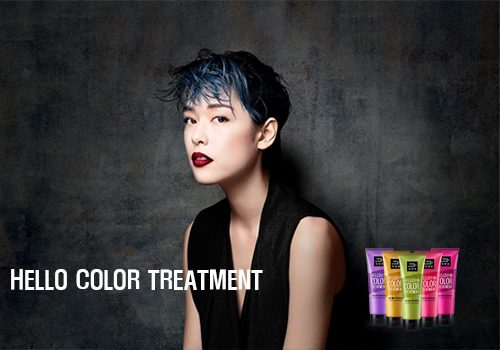
<style>
.page{position:relative;width:500px;height:350px}
.page>*{position:absolute;margin:0}
.t1{font:23.2px "H2hdrM";color:#fcfcfc}
</style>
<div class="page">
<p class="t1" style="left:11px;top:269px;width:252px;height:21px">HELLO COLOR TREATMENT</p>
</div>
